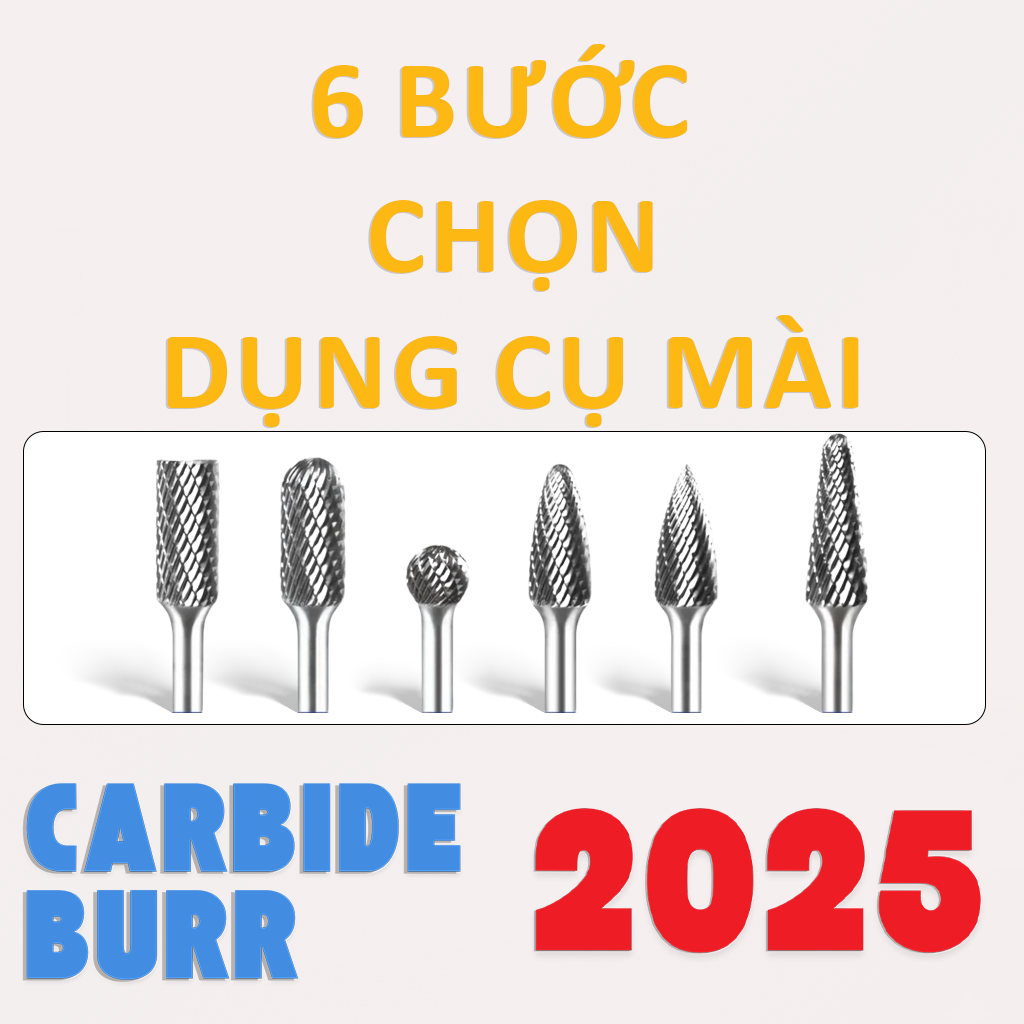
<style>
.page{position:relative;width:1024px;height:1024px;background:#f5efef}
.page>*{position:absolute;margin:0}
.t1{font:112.7px "Calibri-Bold";color:#fdb813;text-transform:uppercase}
</style>
<div class="page">
<p class="t1" style="left:165px;top:45px;width:692px;height:383px;text-align:center">6 bước <br>chọn<br>dụng cụ mài</p>
<p class="t1" style="left:167px;top:44px;width:692px;height:383px;text-align:center">6 bước <br>chọn<br>dụng cụ mài</p>
</div>
